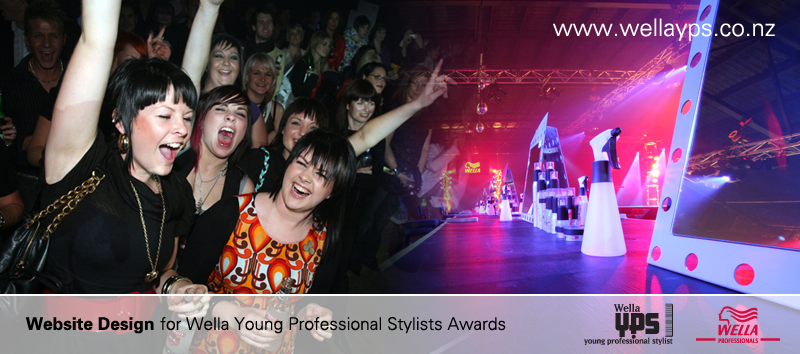
<style>
.page{position:relative;width:800px;height:354px}
.page>*{position:absolute;margin:0}
.t1{font:24px "Univers-Light";color:#ffffff}
.t2{font:17.3px "Univers-Light";color:#000000}
.t3{font:17.3px "Univers-Bold";color:#000000}
</style>
<div class="page">
<p class="t1" style="left:553px;top:18px;width:222px;height:23px">www.wellayps.co.nz</p>
<p class="t2" style="left:25px;top:317px;width:481px;height:17px"><span class="t3">Website Design </span>for Wella Young Professional Stylists Awards</p>
</div>
